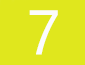
<style>
.page{position:relative;width:85px;height:65px;background:#e0e71d}
.page>*{position:absolute;margin:0}
.t1{font:66.7px "SimHei";color:#fcfcfc}
</style>
<div class="page">
<p class="t1" style="left:29px;top:10px;width:29px;height:45px">7</p>
</div>
